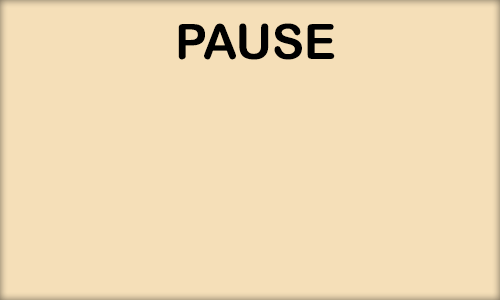
<style>
.page{position:relative;width:500px;height:300px;background:#f5dfb8}
.page>*{position:absolute;margin:0}
.t1{font:48.4px "ArialRoundedMTBold";color:#000000;text-transform:uppercase}
</style>
<div class="page">
<p class="t1" style="left:178px;top:23px;width:157px;height:37px">pause</p>
</div>
